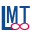
<style>
.page{position:relative;width:32px;height:32px;background:#ffffff}
.page>*{position:absolute;margin:0}
.t1{font:36px "SimHei";color:#0f4a8e}
.t2{font:25px "SimHei";color:#0f4a8e}
.t3{font:24px "SimHei";color:#d9094b}
</style>
<div class="page">
<p class="t1" style="left:1px;top:6px;width:16px;height:24px">L</p>
<p class="t2" style="left:6px;top:6px;width:24px;height:17px">MT</p>
<p class="t3" style="left:10px;top:22px;width:20px;height:9px">∞</p>
</div>
